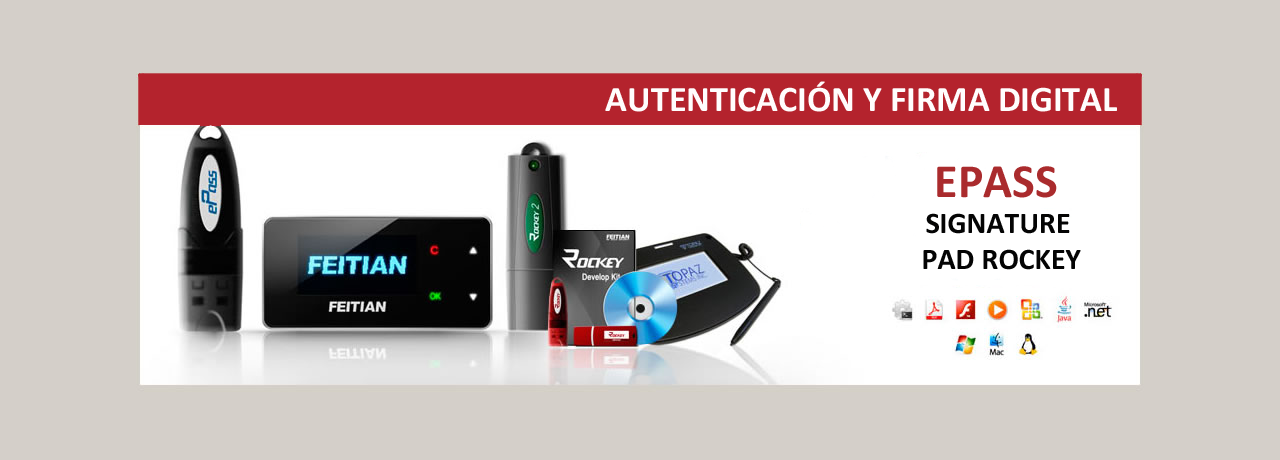
<style>
.page{position:relative;width:1280px;height:460px;background:#d4cfc9}
.page>*{position:absolute;margin:0}
.t1{font:36px "Calibri-Bold";color:#fffdfd}
.t2{font:30px "Calibri-Bold";color:#040404}
.t3{font:48px "Calibri-Bold";color:#aa2b2d}
</style>
<div class="page">
<p class="t1" style="left:605px;top:81px;width:512px;height:31px">AUTENTICACIÓN Y FIRMA DIGITAL</p>
<p class="t2" style="left:923px;top:166px;width:158px;height:104px;text-align:center"><span class="t3">EPASS <br></span>SIGNATURE <br>PAD ROCKEY</p>
</div>
